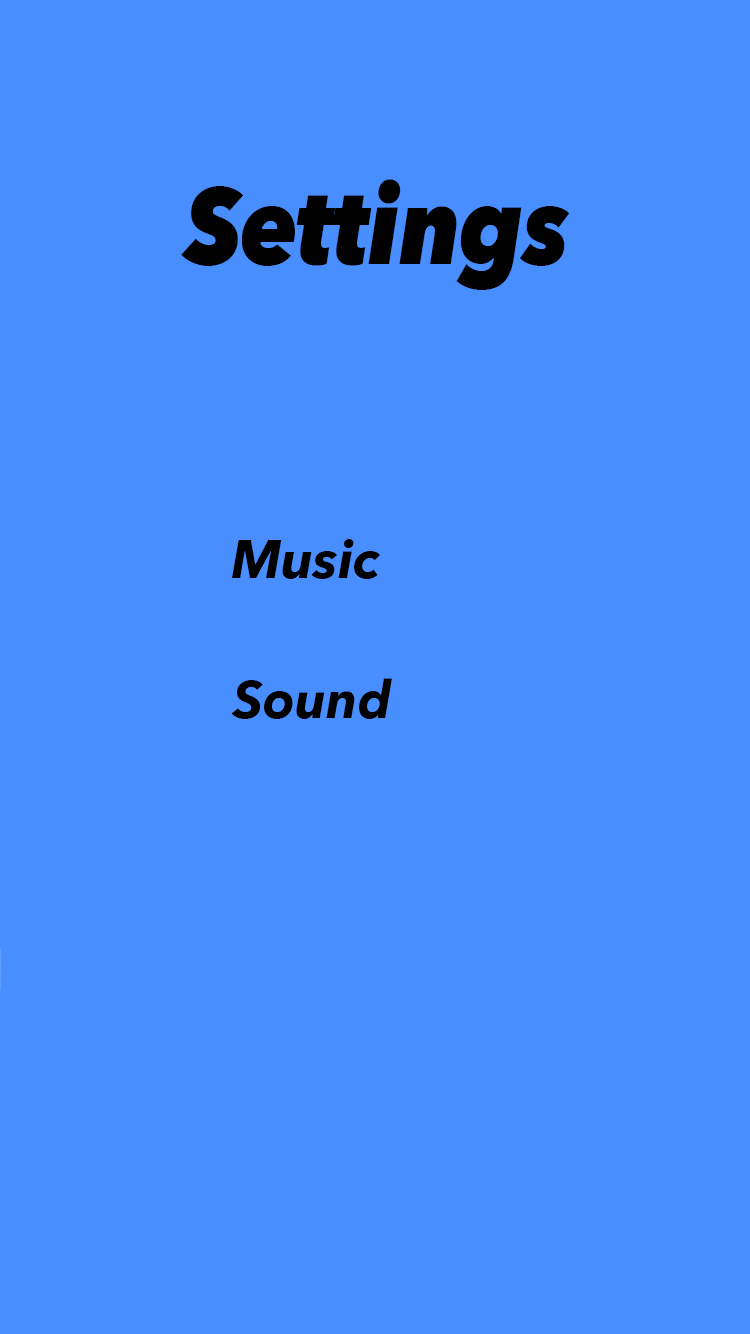
<style>
.page{position:relative;width:750px;height:1334px;background:#498eff}
.page>*{position:absolute;margin:0}
.t1{font:106.6px "AvenirNext-HeavyItalic";color:#000000;scale:0.86 1}
.t2{font:52.6px "AvenirNext-BoldItalic";color:#000000}
.t3{font:52.3px "AvenirNext-BoldItalic";color:#000000}
</style>
<div class="page">
<p class="t1" style="left:181px;top:179px;width:389px;height:111px">Settings</p>
<p class="t2" style="left:232px;top:539px;width:148px;height:40px">Music</p>
<p class="t3" style="left:231px;top:678px;width:161px;height:41px">Sound</p>
</div>
